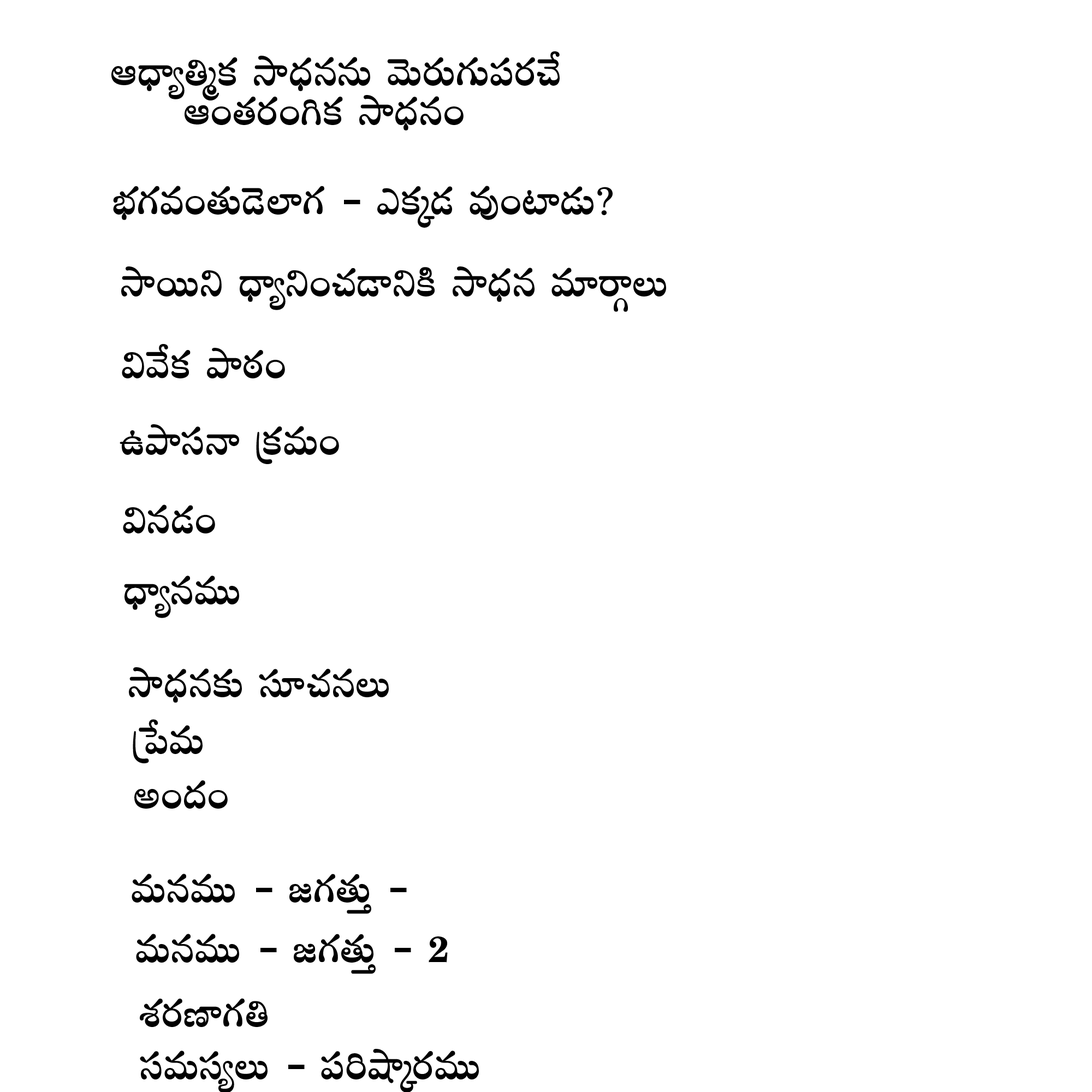
<style>
.page{position:relative;width:1092px;height:1092px;background:#ffffff}
.page>*{position:absolute;margin:0}
.t1{font:54.6px/39.4px "PriyaankaBold";color:#000000}
.t2{font:54.6px "PriyaankaBold";color:#000000}
</style>
<div class="page">
<p class="t1" style="left:111px;top:51px;width:449px;height:79px">Ä&lt;Ûë´‹àø£ kÕ&lt;ÛäqqT yÓTs¡T&gt;∑T|üs¡#˚<br>     Ä+‘·s¡+–ø£ kÕ&lt;Ûäq+</p>
<p class="t2" style="left:113px;top:186px;width:500px;height:42px">uÛÑ&gt;∑e+‘·T&amp;Ó˝≤&gt;∑ ` mø£ÿ&amp;É e⁄+{≤&amp;ÉT?</p>
<p class="t2" style="left:121px;top:266px;width:545px;height:46px">kÕsTTì &lt;Ûë´ì+#·&amp;ÜìøÏ kÕ&lt;Ûäq e÷sêZ\T</p>
<p class="t2" style="left:122px;top:344px;width:163px;height:34px">$y˚ø£ bÕsƒ¡+</p>
<p class="t2" style="left:120px;top:424px;width:219px;height:40px">ñbÕdüHê Áø£eT+</p>
<p class="t2" style="left:123px;top:504px;width:92px;height:30px">$q&amp;É+</p>
<p class="t2" style="left:124px;top:575px;width:115px;height:43px">&lt;Ûë´qeTT</p>
<p class="t2" style="left:129px;top:667px;width:260px;height:36px">kÕ&lt;Ûäq≈£î dü÷#·q\T</p>
<p class="t2" style="left:133px;top:719px;width:70px;height:44px">Áù|eT</p>
<p class="t2" style="left:134px;top:780px;width:94px;height:29px">n+&lt;ä+</p>
<p class="t2" style="left:132px;top:874px;width:275px;height:40px">eTqeTT ` »&gt;∑‘·TÔ `</p>
<p class="t2" style="left:136px;top:934px;width:312px;height:40px">eTqeTT ` »&gt;∑‘·TÔ ` 2</p>
<p class="t2" style="left:140px;top:998px;width:128px;height:29px">X¯s¡D≤&gt;∑‹</p>
<p class="t2" style="left:140px;top:1049px;width:339px;height:44px">düeTdü´\T ` |ü]cÕÿs¡eTT</p>
</div>
